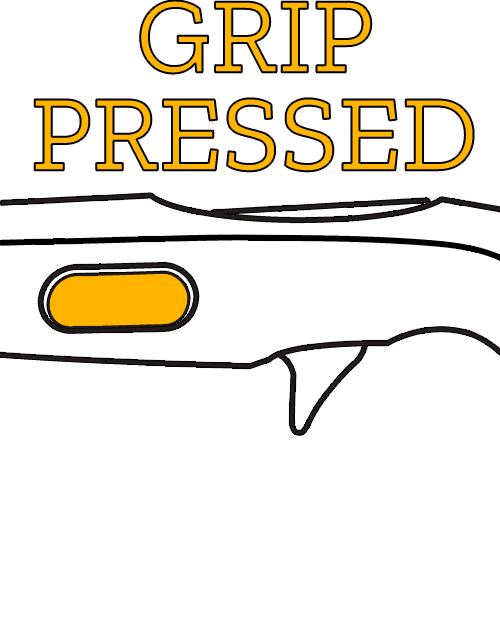
<style>
.page{position:relative;width:500px;height:620px;background:#ffffff}
.page>*{position:absolute;margin:0}
.t1{font:108.3px/97.8px "ZillaSlab-Regular";color:#ffb400}
</style>
<div class="page">
<p class="t1" style="left:34px;top:0px;width:440px;height:172px;text-align:center">GRIP<br>PRESSED</p>
</div>
